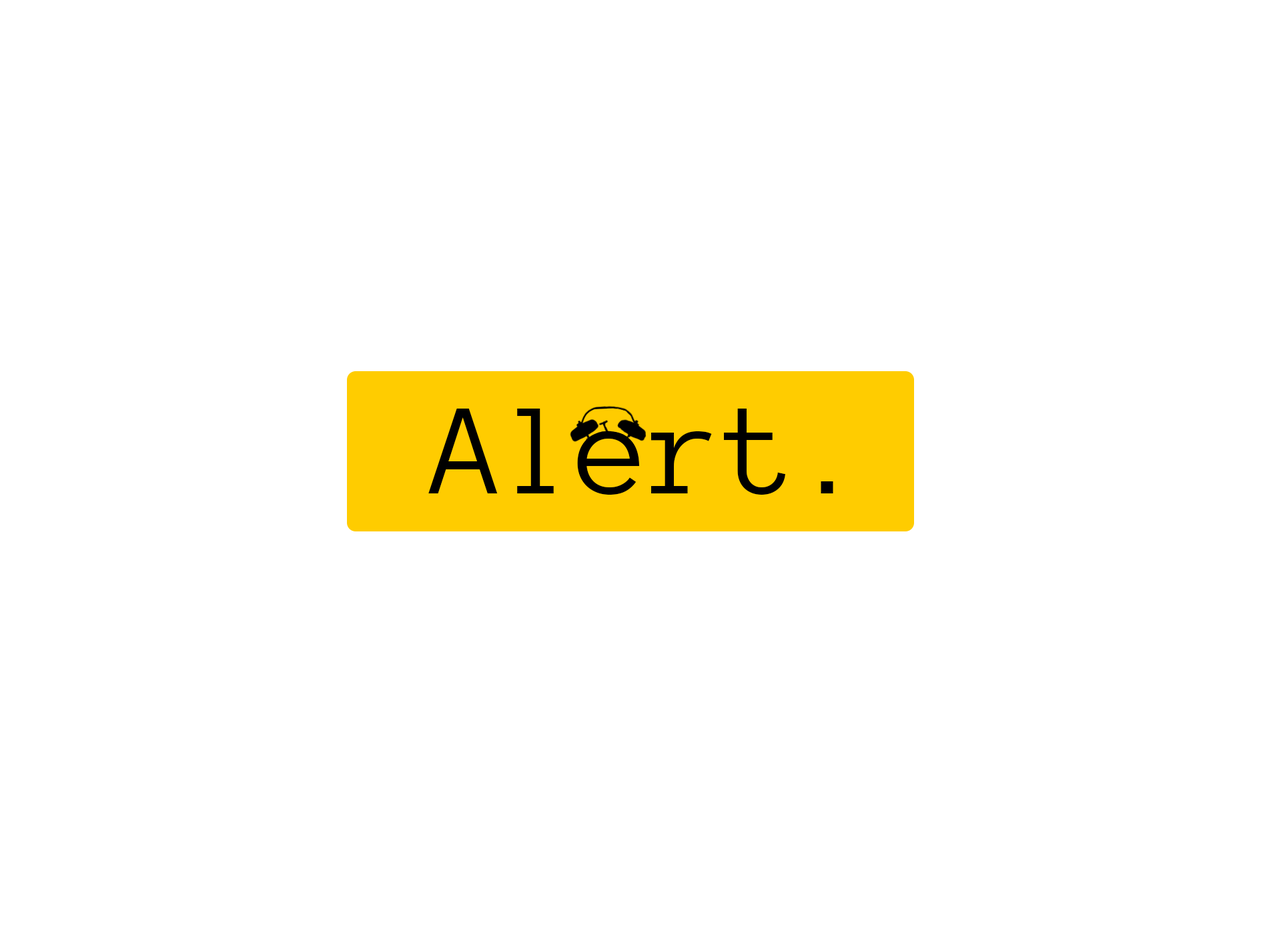
<style>
.page{position:relative;width:1261px;height:946px;background:#ffffff}
.page>*{position:absolute;margin:0}
.t1{font:133.5px "AnonymousPro-Regular";color:#000000}
</style>
<div class="page">
<p class="t1" style="left:428px;top:408px;width:405px;height:86px">Alert.</p>
</div>
